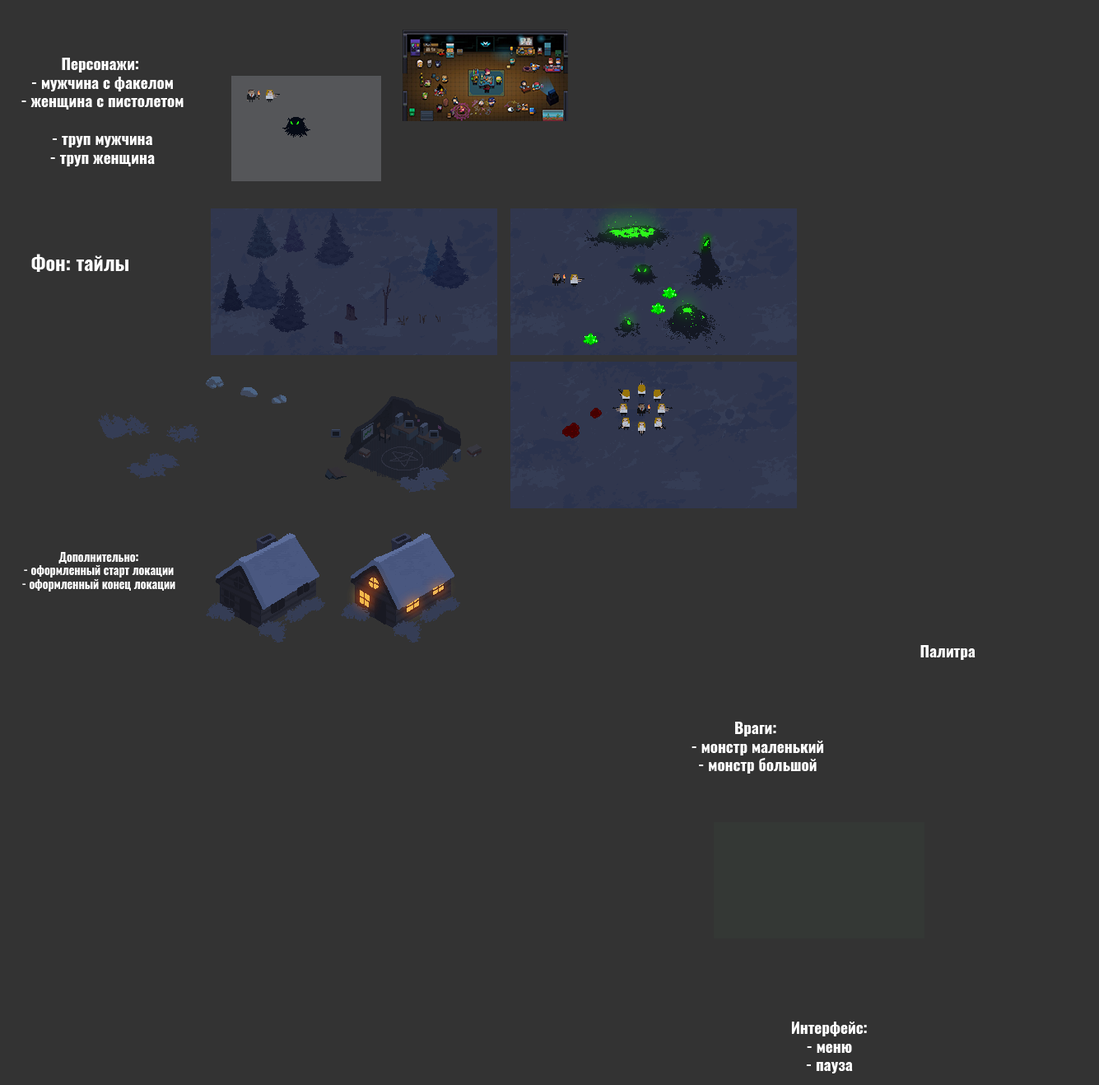
<style>
.page{position:relative;width:1099px;height:1085px;background:#333333}
.page>*{position:absolute;margin:0}
.t1{font:15.6px "Oswald-Bold";color:#ffffff}
.t2{font:19.8px "Oswald-Bold";color:#ffffff}
.t3{font:11.5px "Oswald-Bold";color:#ffffff}
</style>
<div class="page">
<p class="t1" style="left:21px;top:58px;width:163px;height:108px;text-align:center">Персонажи: <br>- мужчина с факелом<br>- женщина с пистолетом<br><br>- труп мужчина<br>- труп женщина</p>
<p class="t2" style="left:31px;top:254px;width:97px;height:18px">Фон: тайлы</p>
<p class="t3" style="left:22px;top:552px;width:153px;height:39px;text-align:center">Дополнительно:<br>- оформленный старт локации<br>- оформленный конец локации</p>
<p class="t1" style="left:921px;top:645px;width:55px;height:15px">Палитра</p>
<p class="t1" style="left:692px;top:721px;width:132px;height:52px;text-align:center">Враги: <br>- монстр маленький<br>- монстр большой</p>
<p class="t1" style="left:791px;top:1021px;width:76px;height:52px;text-align:center">Интерфейс:<br>- меню<br>- пауза</p>
</div>
